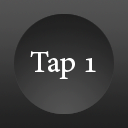
<style>
.page{position:relative;width:128px;height:128px}
.page>*{position:absolute;margin:0}
.t1{font:30px "AdobeHebrew-Regular";color:#ffffff}
</style>
<div class="page">
<p class="t1" style="left:30px;top:51px;width:66px;height:28px">Tap 1</p>
</div>
